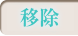
<style>
.page{position:relative;width:78px;height:36px}
.page>*{position:absolute;margin:0}
.t1{font:20px "RyuminPr6N-Bold";color:#3ec6c2}
</style>
<div class="page">
<p class="t1" style="left:20px;top:7px;width:39px;height:20px">移除</p>
</div>
